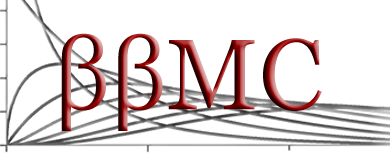
<style>
.page{position:relative;width:390px;height:153px;background:#ffffff}
.page>*{position:absolute;margin:0}
.t1{font:100px "Georgia"}
</style>
<div class="page">
<p class="t1" style="left:61px;top:33px;width:261px;height:98px">ββMC</p>
</div>
